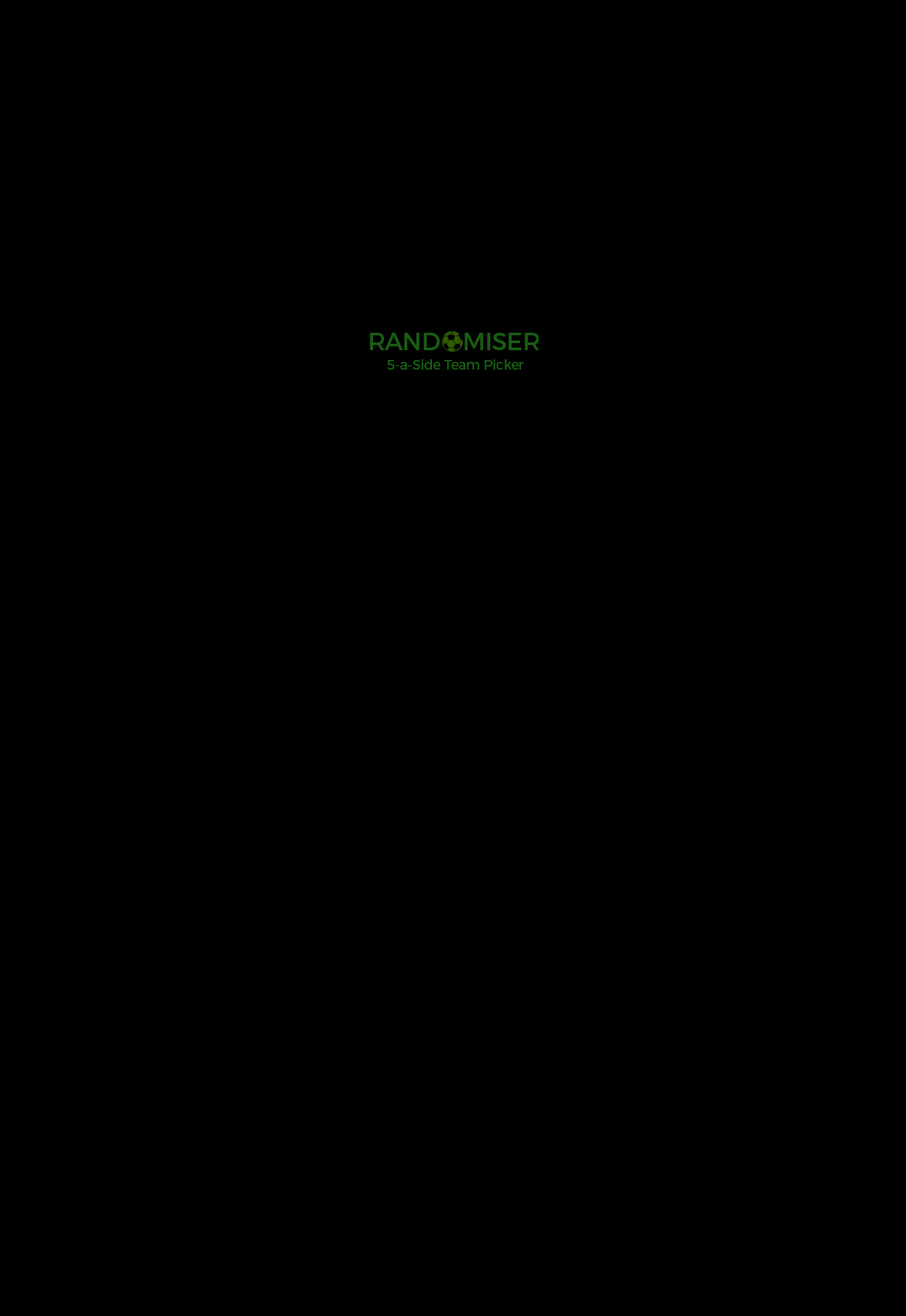
<style>
.page{position:relative;width:906px;height:1316px;background:#000000}
.page>*{position:absolute;margin:0}
.t1{font:24.6px "Montserrat-Regular";letter-spacing:-0.02em;color:#185c13}
.t2{font:13.6px "Montserrat-Regular";letter-spacing:-0.02em;color:#185c13}
</style>
<div class="page">
<p class="t1" style="left:370px;top:333px;width:70px;height:17px">RAND</p>
<p class="t1" style="left:464px;top:333px;width:75px;height:17px">MISER</p>
<p class="t2" style="left:387px;top:359px;width:137px;height:11px">5-a-Side Team Picker</p>
</div>
